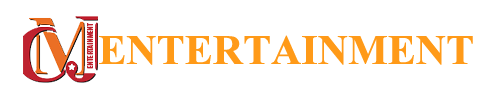
<style>
.page{position:relative;width:490px;height:98px;background:#ffffff}
.page>*{position:absolute;margin:0}
.t1{font:8px "MyriadPro-BoldCond";color:#be222f}
</style>
<div class="page">
<p class="t1" style="left:87px;top:23px;width:6px;height:46px;rotate:-90deg">ENTERTAINMENT</p>
</div>
